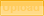
<style>
.page{position:relative;width:44px;height:16px;background:#ffcc5d}
.page>*{position:absolute;margin:0}
.t1{font:11px "Arial-BoldMT";color:#ffcc5d}
</style>
<div class="page">
<p class="t1" style="left:2px;top:3px;width:38px;height:10px">Upload</p>
</div>
